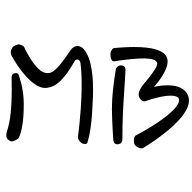
<style>
.page{position:relative;width:192px;height:192px;background:#ffffff}
.page>*{position:absolute;margin:0}
.t1{font:140px "Rosemary";color:#000000}
</style>
<div class="page">
<p class="t1" style="left:6px;top:44px;width:183px;height:105px">MB</p>
</div>
